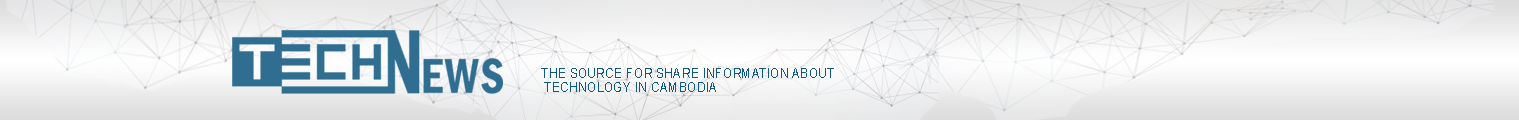
<style>
.page{position:relative;width:1519px;height:120px}
.page>*{position:absolute;margin:0}
.t1{font:13.2px "ArialMT";letter-spacing:0.025em;color:#0e568d;scale:0.91 1}
</style>
<div class="page">
<p class="t1" style="left:541px;top:68px;width:293px;height:24px">THE SOURCE FOR SHARE INFORMATION ABOUT<br> TECHNOLOGY IN CAMBODIA</p>
</div>
